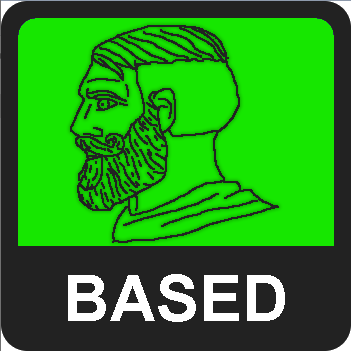
<style>
.page{position:relative;width:351px;height:351px;background:#222222}
.page>*{position:absolute;margin:0}
.t1{font:64.3px "Arial-BoldMT";color:#ffffff}
</style>
<div class="page">
<p class="t1" style="left:68px;top:274px;width:217px;height:48px">BASED</p>
</div>
